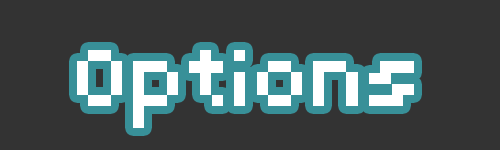
<style>
.page{position:relative;width:500px;height:150px;background:#333333}
.page>*{position:absolute;margin:0}
.t1{font:90px "04b03";color:#ffffff}
</style>
<div class="page">
<p class="t1" style="left:77px;top:50px;width:337px;height:78px">Options</p>
</div>
